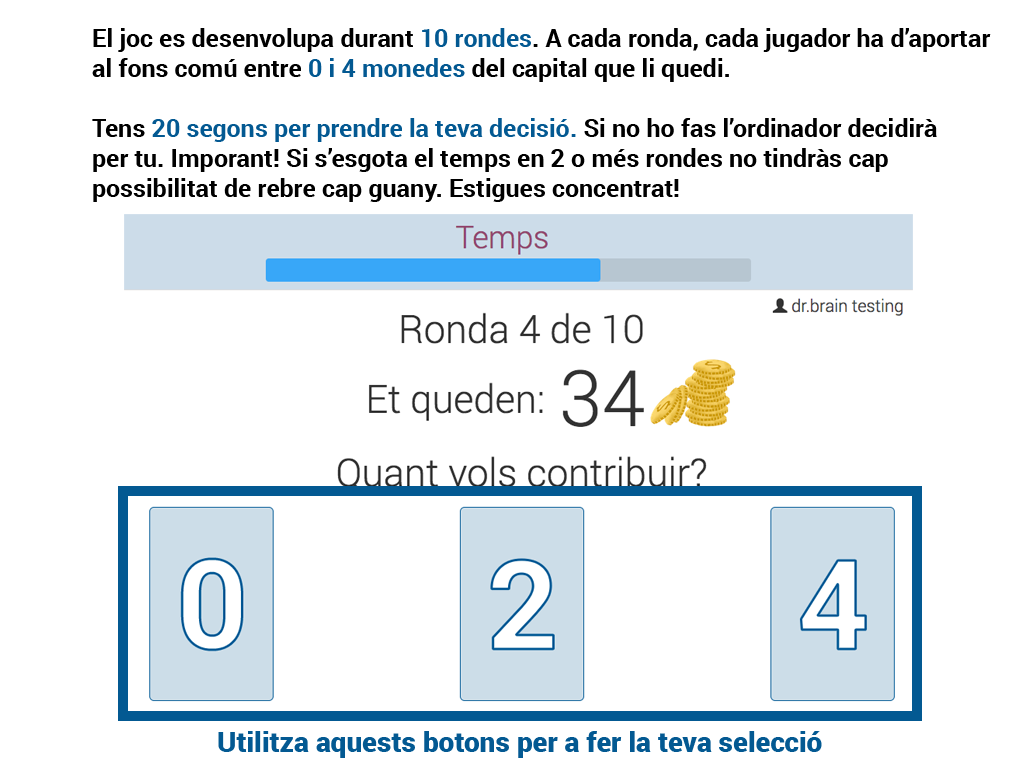
<style>
.page{position:relative;width:1024px;height:768px;background:#ffffff}
.page>*{position:absolute;margin:0}
.t1{font:25px "Roboto-Bold";color:#000000}
.t2{font:25px "Roboto-Bold";color:#035992}
.t3{font:28px "Roboto-Black";color:#035992}
</style>
<div class="page">
<p class="t1" style="left:92px;top:28px;width:899px;height:174px">El joc es desenvolupa durant <span class="t2">10 rondes</span>. A cada ronda, cada jugador ha d’aportar <br>al fons comú entre <span class="t2">0 i 4 monedes</span> del capital que li quedi.<br><br>Tens <span class="t2">20 segons per prendre la teva decisió.</span> Si no ho fas l’ordinador decidirà <br>per tu. Imporant! Si s’esgota el temps en 2 o més rondes no tindràs cap <br>possibilitat de rebre cap guany. Estigues concentrat!</p>
<p class="t3" style="left:218px;top:731px;width:604px;height:27px">Utilitza aquests botons per a fer la teva selecció</p>
</div>
